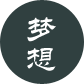
<style>
.page{position:relative;width:84px;height:84px;background:#304040}
.page>*{position:absolute;margin:0}
.t1{font:32px/30px "STLiti";color:#ffffff}
</style>
<div class="page">
<p class="t1" style="left:27px;top:17px;width:29px;height:54px">梦<br>想</p>
</div>
